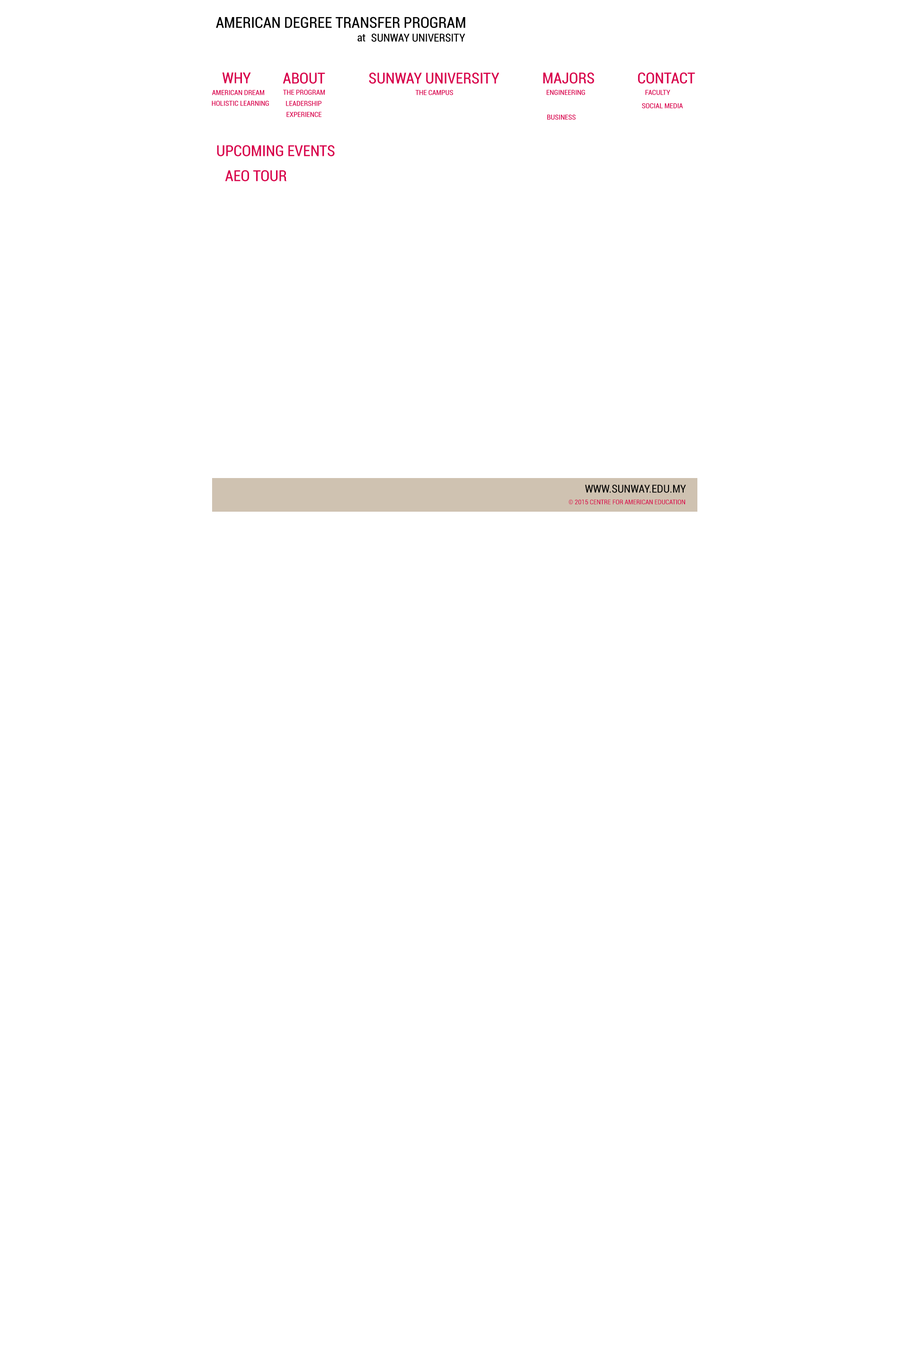
<style>
.page{position:relative;width:909px;height:1355px;background:#ffffff}
.page>*{position:absolute;margin:0}
.t1{font:15.2px "Roboto-Condensed";color:#000000}
.t2{font:10.9px "Roboto-Condensed";color:#000000}
.t3{font:15.2px "Roboto-Condensed";color:#d8024a}
.t4{font:7.1px "Roboto-Condensed";color:#d8024a}
.t5{font:6.6px "Roboto-Condensed";color:#d8024a}
</style>
<div class="page">
<p class="t1" style="left:216px;top:17px;width:250px;height:11px">AMERICAN DEGREE TRANSFER PROGRAM</p>
<p class="t2" style="left:358px;top:34px;width:8px;height:8px">at</p>
<p class="t2" style="left:371px;top:34px;width:95px;height:8px">SUNWAY UNIVERSITY</p>
<p class="t3" style="left:222px;top:72px;width:29px;height:11px">WHY</p>
<p class="t3" style="left:283px;top:72px;width:42px;height:12px">ABOUT</p>
<p class="t3" style="left:369px;top:72px;width:131px;height:12px">SUNWAY UNIVERSITY</p>
<p class="t3" style="left:543px;top:72px;width:51px;height:12px">MAJORS</p>
<p class="t3" style="left:638px;top:72px;width:57px;height:12px">CONTACT</p>
<p class="t4" style="left:283px;top:90px;width:42px;height:5px">THE PROGRAM</p>
<p class="t4" style="left:547px;top:90px;width:38px;height:5px">ENGINEERING</p>
<p class="t4" style="left:646px;top:90px;width:25px;height:5px">FACULTY</p>
<p class="t4" style="left:212px;top:100px;width:57px;height:6px">HOLISTIC LEARNING</p>
<p class="t4" style="left:212px;top:90px;width:52px;height:5px">AMERICAN DREAM</p>
<p class="t4" style="left:286px;top:101px;width:36px;height:5px">LEADERSHIP</p>
<p class="t4" style="left:415px;top:90px;width:38px;height:5px">THE CAMPUS</p>
<p class="t4" style="left:287px;top:112px;width:35px;height:5px">EXPERIENCE</p>
<p class="t4" style="left:642px;top:103px;width:42px;height:5px">SOCIAL MEDIA</p>
<p class="t4" style="left:548px;top:115px;width:28px;height:5px">BUSINESS</p>
<p class="t3" style="left:217px;top:145px;width:118px;height:11px">UPCOMING EVENTS</p>
<p class="t3" style="left:225px;top:170px;width:62px;height:11px">AEO TOUR</p>
<p class="t2" style="left:585px;top:485px;width:101px;height:8px">WWW.SUNWAY.EDU.MY</p>
<p class="t5" style="left:569px;top:499px;width:116px;height:5px">© 2015 CENTRE FOR AMERICAN EDUCATION</p>
</div>
